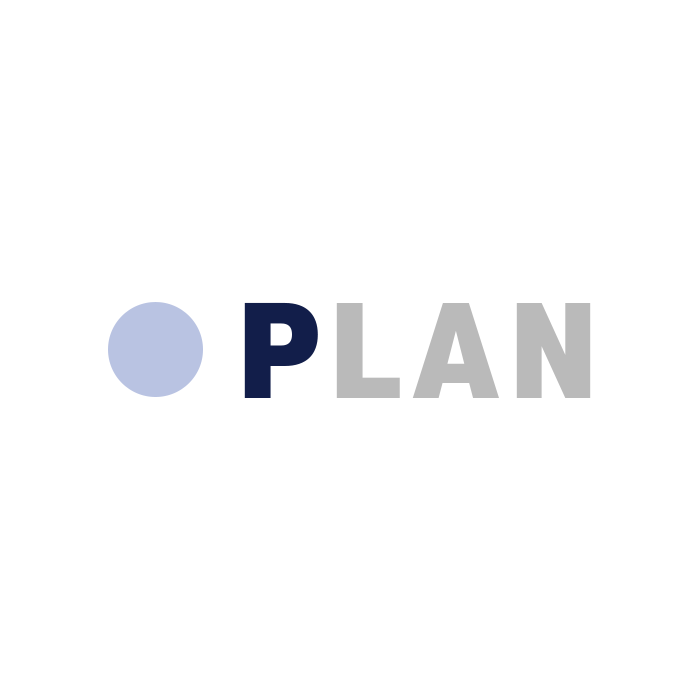
<style>
.page{position:relative;width:700px;height:700px;background:#ffffff}
.page>*{position:absolute;margin:0}
.t1{font:118.6px "S-CoreDream-9Black";letter-spacing:0.09em;color:#bababa}
.t2{font:118.6px "S-CoreDream-9Black";letter-spacing:0.09em;color:#121e4a}
</style>
<div class="page">
<p class="t1" style="left:244px;top:302px;width:347px;height:96px"><span class="t2">P</span>LAN</p>
</div>
